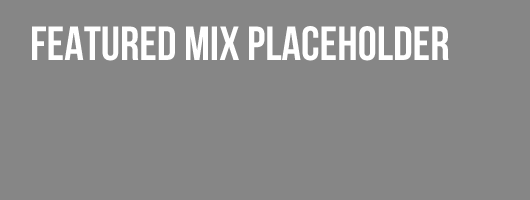
<style>
.page{position:relative;width:530px;height:200px;background:#868686}
.page>*{position:absolute;margin:0}
.t1{font:48px "BebasNeue";color:#ffffff}
</style>
<div class="page">
<p class="t1" style="left:32px;top:26px;width:417px;height:35px">featured mix placeholder</p>
</div>
